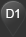
<style>
.page{position:relative;width:26px;height:37px;background:#333333}
.page>*{position:absolute;margin:0}
.t1{font:12px "ArialMT";color:#ffffff}
</style>
<div class="page">
<p class="t1" style="left:6px;top:9px;width:13px;height:9px">D1</p>
</div>
